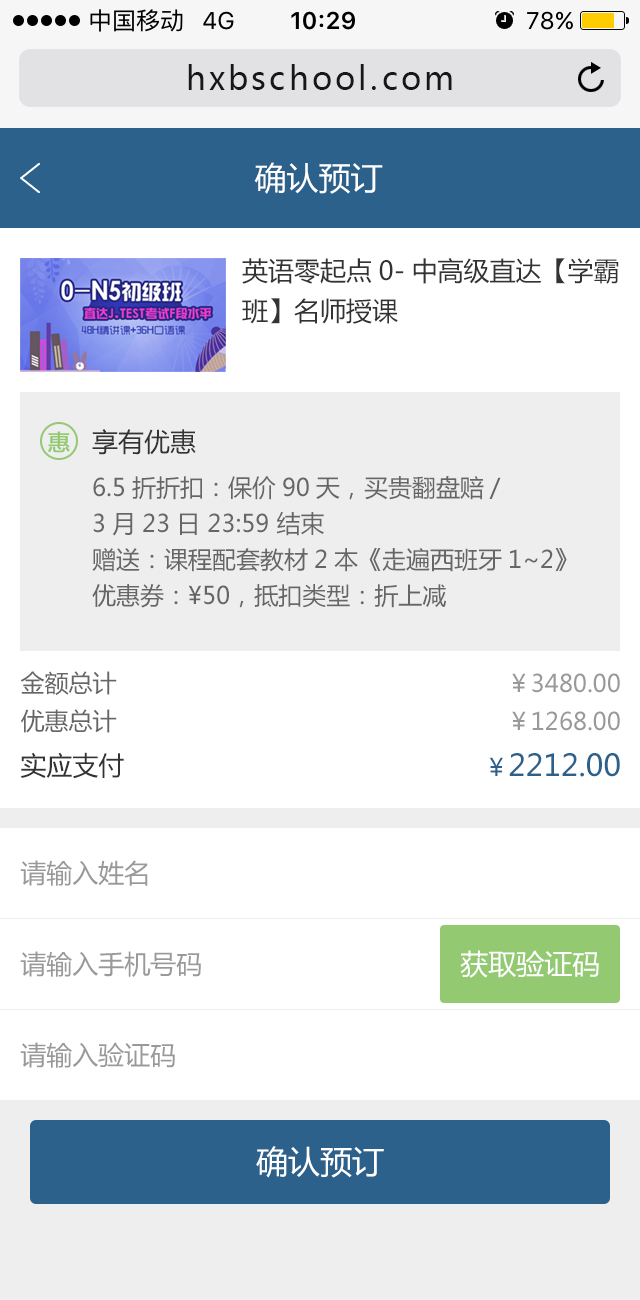
<style>
.page{position:relative;width:640px;height:1300px;background:#ffffff}
.page>*{position:absolute;margin:0}
.t1{font:32px "MicrosoftYaHei";letter-spacing:0.1em;color:#171717}
.t2{font:32px "MicrosoftYaHei";color:#ffffff}
.t3{font:26px/40px "MicrosoftYaHei";color:#333333}
.t4{font:22px "MicrosoftYaHei";color:#93c971;font-weight:bold}
.t5{font:26px "MicrosoftYaHei";color:#333333}
.t6{font:24px/36px "MicrosoftYaHei";color:#666666}
.t7{font:24px "MicrosoftYaHei";color:#666666}
.t8{font:24px "MicrosoftYaHei";color:#999999}
.t9{font:30px "MicrosoftYaHei";color:#2c618b}
.t10{font:24px "MicrosoftYaHei";color:#2c618b}
.t11{font:26px "MicrosoftYaHei";color:#999999}
.t12{font:28px "MicrosoftYaHei";color:#ffffff}
</style>
<div class="page">
<p class="t1" style="left:188px;top:64px;width:264px;height:26px">hxbschool.com</p>
<p class="t2" style="left:254px;top:162px;width:129px;height:32px">确认预订</p>
<p class="t3" style="left:242px;top:258px;width:377px;height:66px">英语零起点0-中高级直达【学霸<br>班】名师授课</p>
<p class="t4" style="left:48px;top:431px;width:22px;height:22px">惠</p>
<p class="t5" style="left:92px;top:429px;width:104px;height:26px">享有优惠</p>
<p class="t6" style="left:92px;top:475px;width:475px;height:133px">6.5折折扣：保价90天，买贵翻盘赔/   <br>3月23日 23:59 结束<br>赠送：课程配套教材2本《走遍西班牙1~2》<br>优惠券：¥50，抵扣类型：折上减</p>
<p class="t7" style="left:20px;top:671px;width:97px;height:24px">金额总计</p>
<p class="t8" style="left:512px;top:673px;width:108px;height:20px">￥3480.00</p>
<p class="t7" style="left:21px;top:709px;width:96px;height:24px">优惠总计</p>
<p class="t8" style="left:512px;top:711px;width:108px;height:20px">￥1268.00</p>
<p class="t5" style="left:20px;top:752px;width:104px;height:27px">实应支付</p>
<p class="t9" style="left:489px;top:753px;width:131px;height:24px"><span class="t10">￥</span>2212.00</p>
<p class="t11" style="left:20px;top:860px;width:128px;height:26px">请输入姓名</p>
<p class="t11" style="left:20px;top:951px;width:181px;height:26px">请输入手机号码</p>
<p class="t12" style="left:460px;top:950px;width:139px;height:28px">获取验证码</p>
<p class="t11" style="left:20px;top:1042px;width:155px;height:26px">请输入验证码</p>
<p class="t2" style="left:256px;top:1146px;width:128px;height:32px">确认预订</p>
</div>
